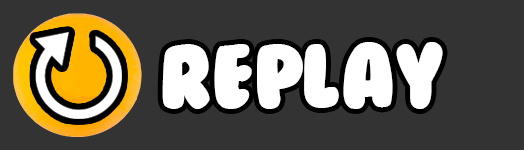
<style>
.page{position:relative;width:524px;height:150px;background:#333333}
.page>*{position:absolute;margin:0}
.t1{font:84px "BubbleGum";color:#ffffff}
</style>
<div class="page">
<p class="t1" style="left:162px;top:42px;width:281px;height:67px">Replay</p>
</div>
